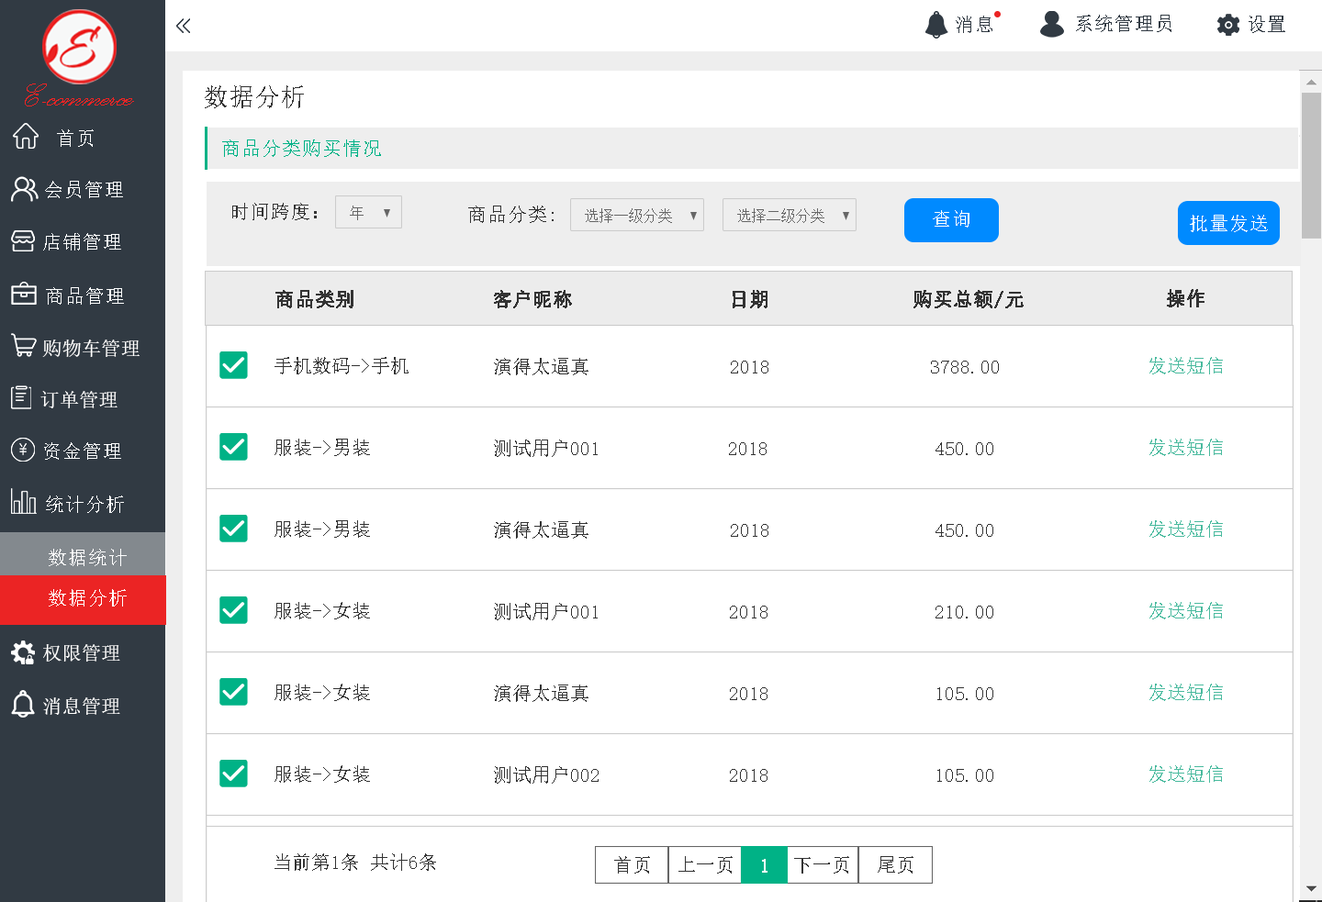
<style>
.page{position:relative;width:1322px;height:902px;background:#ffffff}
.page>*{position:absolute;margin:0}
.t1{font:19.6px "NSimSun";color:#313a43}
.t2{font:41.1px "PalaceScriptMT";color:#eb2424}
.t3{font:24.5px "NSimSun";color:#333333}
.t4{font:19.6px "NSimSun";color:#feffff}
.t5{font:19.6px "NSimSun";color:#00b286}
.t6{font:19.6px "NSimSun";color:#333333}
.t7{font:14.7px "NSimSun";color:#666666}
.t8{font:19.6px "NSimSun";color:#ffffff}
.t9{font:19.6px "SimSun";color:#333333;font-weight:bold}
.t10{font:19.6px "SimSun";color:#ffffff}
.t11{font:19.6px "SimSun";color:#333333}
.t12{font:19.6px "SimSun";color:#49ba9e}
.t13{font:19.6px "SimSun";color:#ffffff;font-weight:bold}
</style>
<div class="page">
<p class="t1" style="left:955px;top:16px;width:37px;height:17px">消息</p>
<p class="t1" style="left:1076px;top:15px;width:95px;height:17px">系统管理员</p>
<p class="t1" style="left:1248px;top:16px;width:37px;height:17px">设置</p>
<p class="t2" style="left:25px;top:84px;width:109px;height:22px">E-commerce</p>
<p class="t3" style="left:205px;top:85px;width:99px;height:23px">数据分析</p>
<p class="t4" style="left:57px;top:129px;width:37px;height:18px">首页</p>
<p class="t5" style="left:222px;top:140px;width:159px;height:17px">商品分类购买情况</p>
<p class="t4" style="left:45px;top:181px;width:78px;height:17px">会员管理</p>
<p class="t6" style="left:232px;top:203px;width:85px;height:17px">时间跨度：</p>
<p class="t7" style="left:350px;top:206px;width:13px;height:14px">年</p>
<p class="t6" style="left:468px;top:206px;width:85px;height:17px">商品分类:</p>
<p class="t7" style="left:585px;top:208px;width:87px;height:15px">选择一级分类</p>
<p class="t7" style="left:737px;top:208px;width:87px;height:15px">选择二级分类</p>
<p class="t8" style="left:933px;top:210px;width:36px;height:18px">查询</p>
<p class="t8" style="left:1189px;top:215px;width:79px;height:17px">批量发送</p>
<p class="t4" style="left:43px;top:233px;width:78px;height:18px">店铺管理</p>
<p class="t4" style="left:46px;top:287px;width:78px;height:18px">商品管理</p>
<p class="t9" style="left:275px;top:290px;width:78px;height:18px">商品类别</p>
<p class="t9" style="left:494px;top:290px;width:78px;height:18px">客户昵称</p>
<p class="t9" style="left:732px;top:290px;width:35px;height:18px">日期</p>
<p class="t9" style="left:913px;top:290px;width:110px;height:18px">购买总额/元</p>
<p class="t9" style="left:1167px;top:289px;width:37px;height:18px">操作</p>
<p class="t10" style="left:42px;top:340px;width:98px;height:17px">购物车管理</p>
<p class="t11" style="left:274px;top:357px;width:134px;height:17px">手机数码-&gt;手机</p>
<p class="t11" style="left:494px;top:358px;width:94px;height:17px">演得太逼真</p>
<p class="t11" style="left:731px;top:361px;width:37px;height:13px">2018</p>
<p class="t11" style="left:931px;top:361px;width:68px;height:13px">3788.00</p>
<p class="t12" style="left:1149px;top:357px;width:74px;height:17px">发送短信</p>
<p class="t10" style="left:40px;top:391px;width:77px;height:17px">订单管理</p>
<p class="t4" style="left:44px;top:442px;width:77px;height:18px">资金管理</p>
<p class="t11" style="left:274px;top:439px;width:96px;height:17px">服装-&gt;男装</p>
<p class="t11" style="left:494px;top:440px;width:104px;height:17px">测试用户001</p>
<p class="t11" style="left:729px;top:442px;width:37px;height:13px">2018</p>
<p class="t11" style="left:935px;top:442px;width:58px;height:13px">450.00</p>
<p class="t12" style="left:1149px;top:439px;width:74px;height:17px">发送短信</p>
<p class="t4" style="left:46px;top:496px;width:78px;height:17px">统计分析</p>
<p class="t11" style="left:274px;top:520px;width:96px;height:18px">服装-&gt;男装</p>
<p class="t11" style="left:494px;top:521px;width:94px;height:18px">演得太逼真</p>
<p class="t12" style="left:1149px;top:520px;width:74px;height:18px">发送短信</p>
<p class="t11" style="left:731px;top:524px;width:37px;height:13px">2018</p>
<p class="t11" style="left:935px;top:524px;width:58px;height:13px">450.00</p>
<p class="t8" style="left:49px;top:549px;width:78px;height:17px">数据统计</p>
<p class="t8" style="left:49px;top:589px;width:78px;height:18px">数据分析</p>
<p class="t11" style="left:274px;top:602px;width:96px;height:18px">服装-&gt;女装</p>
<p class="t11" style="left:494px;top:603px;width:104px;height:17px">测试用户001</p>
<p class="t11" style="left:730px;top:606px;width:37px;height:13px">2018</p>
<p class="t11" style="left:935px;top:606px;width:58px;height:13px">210.00</p>
<p class="t12" style="left:1149px;top:602px;width:74px;height:18px">发送短信</p>
<p class="t10" style="left:43px;top:644px;width:77px;height:18px">权限管理</p>
<p class="t11" style="left:274px;top:684px;width:96px;height:17px">服装-&gt;女装</p>
<p class="t11" style="left:494px;top:685px;width:94px;height:17px">演得太逼真</p>
<p class="t11" style="left:730px;top:687px;width:37px;height:13px">2018</p>
<p class="t11" style="left:937px;top:687px;width:56px;height:13px">105.00</p>
<p class="t12" style="left:1149px;top:684px;width:74px;height:17px">发送短信</p>
<p class="t10" style="left:43px;top:698px;width:77px;height:17px">消息管理</p>
<p class="t11" style="left:274px;top:765px;width:96px;height:18px">服装-&gt;女装</p>
<p class="t11" style="left:494px;top:766px;width:104px;height:18px">测试用户002</p>
<p class="t11" style="left:730px;top:769px;width:37px;height:13px">2018</p>
<p class="t11" style="left:937px;top:769px;width:56px;height:13px">105.00</p>
<p class="t12" style="left:1149px;top:765px;width:74px;height:18px">发送短信</p>
<p class="t11" style="left:274px;top:854px;width:162px;height:17px">当前第1条 共计6条</p>
<p class="t11" style="left:614px;top:856px;width:36px;height:18px">首页</p>
<p class="t11" style="left:678px;top:856px;width:54px;height:18px">上一页</p>
<p class="t11" style="left:794px;top:856px;width:55px;height:18px">下一页</p>
<p class="t11" style="left:877px;top:856px;width:36px;height:18px">尾页</p>
<p class="t13" style="left:762px;top:859px;width:5px;height:14px">1</p>
</div>
